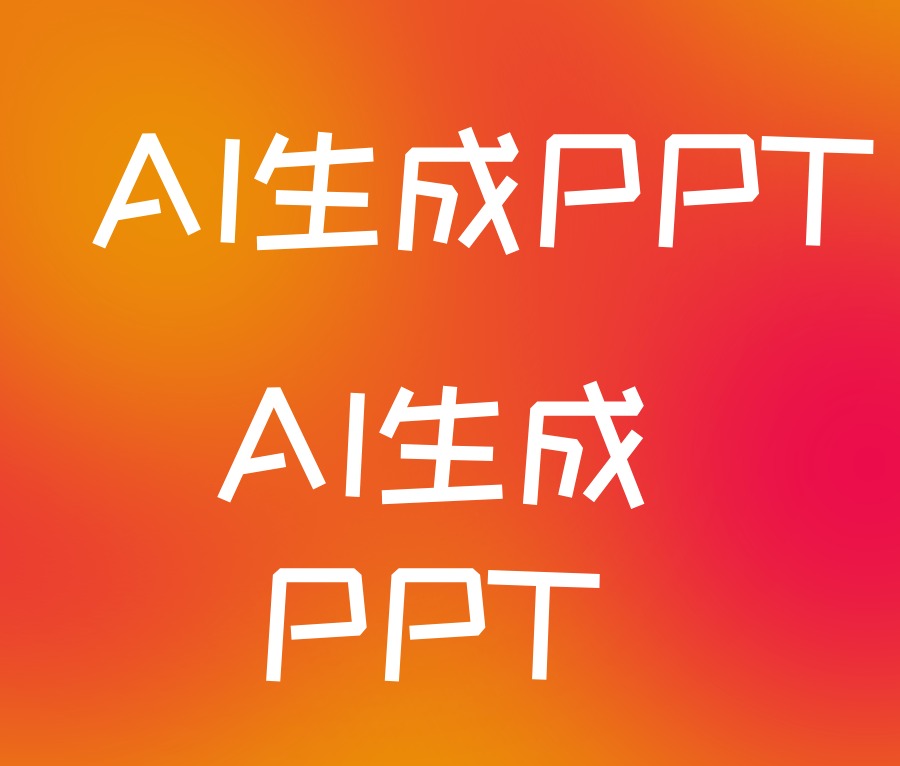
<style>
.page{position:relative;width:900px;height:766px}
.page>*{position:absolute;margin:0}
.t1{font:150.4px "ZCOOLKuaiLe-Regular";letter-spacing:0.03em;color:#ffffff}
</style>
<div class="page">
<p class="t1" style="left:92px;top:126px;width:782px;height:130px">AI生成PPT</p>
<p class="t1" style="left:217px;top:380px;width:428px;height:302px">AI生成<br> PPT</p>
</div>
